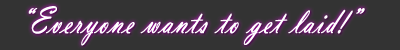
<style>
.page{position:relative;width:400px;height:50px;background:#333333}
.page>*{position:absolute;margin:0}
.t1{font:39px "VladimirScript";letter-spacing:0.032em;color:#ffffff;font-weight:bold;scale:0.77 1}
</style>
<div class="page">
<p class="t1" style="left:28px;top:6px;width:337px;height:40px">“Everyone wants to get laid!”</p>
</div>
